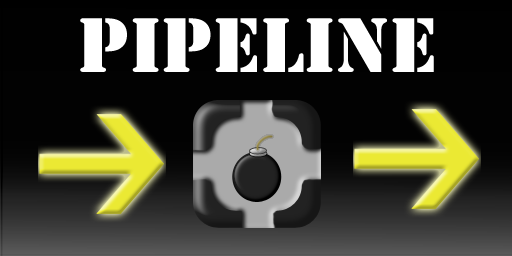
<style>
.page{position:relative;width:512px;height:256px;background:#020202}
.page>*{position:absolute;margin:0}
.t1{font:72px "StencilStd";color:#ffffff}
</style>
<div class="page">
<p class="t1" style="left:80px;top:18px;width:354px;height:54px">PIPELINE</p>
</div>
